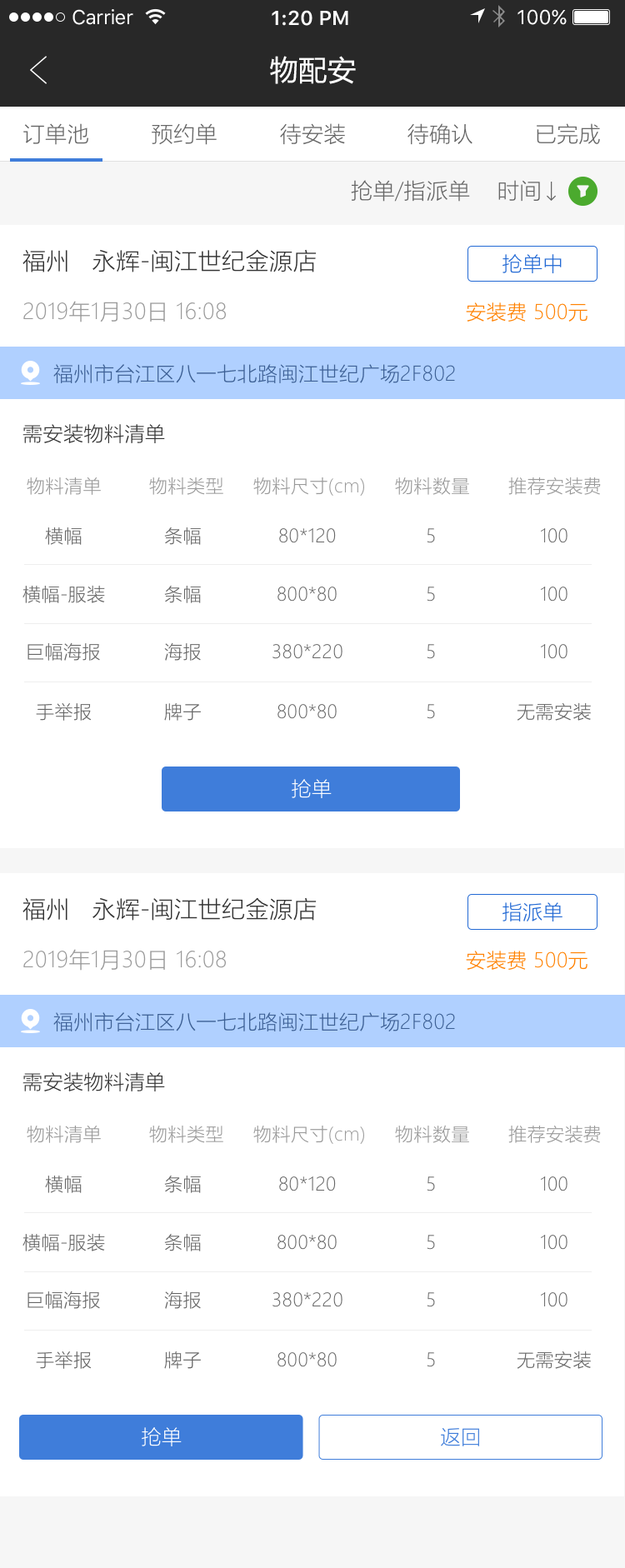
<style>
.page{position:relative;width:625px;height:1568px;background:#ffffff}
.page>*{position:absolute;margin:0}
.t1{font:20px "SFUIText-Regular";letter-spacing:-0.025em;color:#ffffff}
.t2{font:20px "SFUIText-Semibold";color:#ffffff}
.t3{font:20px "SFUIText-Regular";color:#ffffff}
.t4{font:28.3px "MicrosoftYaHei";letter-spacing:0.02em;color:#ffffff}
.t5{font:21.7px "MicrosoftYaHeiLight";letter-spacing:0.02em;color:#666666}
.t6{font:23.3px "MicrosoftYaHeiLight";letter-spacing:0.02em;color:#333333}
.t7{font:20px "MicrosoftYaHeiLight";letter-spacing:0.02em;color:#2269d4}
.t8{font:21.7px "MicrosoftYaHeiLight";letter-spacing:0.02em;color:#999999}
.t9{font:20px "MicrosoftYaHeiLight";letter-spacing:0.02em;color:#ff8100}
.t10{font:20px "MicrosoftYaHeiLight";letter-spacing:0.02em;color:#3d6094}
.t11{font:20px "MicrosoftYaHeiLight";letter-spacing:0.02em;color:#333333}
.t12{font:18.3px "MicrosoftYaHeiLight";letter-spacing:0.02em;color:#999999}
.t13{font:18.3px "MicrosoftYaHeiLight";letter-spacing:0.02em;color:#666666}
.t14{font:20px "MicrosoftYaHeiLight";letter-spacing:0.02em;color:#ffffff}
.t15{font:20px "MicrosoftYaHeiLight";letter-spacing:0.02em;color:#3f7dda}
</style>
<div class="page">
<p class="t1" style="left:72px;top:9px;width:61px;height:16px">Carrier</p>
<p class="t2" style="left:272px;top:10px;width:76px;height:16px">1:20 PM</p>
<p class="t3" style="left:517px;top:9px;width:50px;height:16px">100%</p>
<p class="t4" style="left:270px;top:56px;width:86px;height:28px">物配安</p>
<p class="t5" style="left:23px;top:123px;width:65px;height:22px">订单池</p>
<p class="t5" style="left:152px;top:123px;width:65px;height:22px">预约单</p>
<p class="t5" style="left:280px;top:123px;width:65px;height:22px">待安装</p>
<p class="t5" style="left:407px;top:123px;width:65px;height:22px">待确认</p>
<p class="t5" style="left:537px;top:123px;width:63px;height:21px">已完成</p>
<p class="t5" style="left:351px;top:180px;width:119px;height:22px">抢单/指派单</p>
<p class="t5" style="left:498px;top:180px;width:42px;height:22px">时间</p>
<p class="t6" style="left:22px;top:249px;width:295px;height:23px">福州   永辉-闽江世纪金源店</p>
<p class="t7" style="left:502px;top:254px;width:60px;height:20px">抢单中</p>
<p class="t8" style="left:23px;top:301px;width:203px;height:21px">2019年1月30日 16:08</p>
<p class="t9" style="left:466px;top:302px;width:121px;height:20px">安装费 500元</p>
<p class="t10" style="left:53px;top:364px;width:402px;height:19px">福州市台江区八一七北路闽江世纪广场2F802</p>
<p class="t11" style="left:22px;top:424px;width:143px;height:19px">需安装物料清单</p>
<p class="t12" style="left:27px;top:477px;width:74px;height:18px">物料清单</p>
<p class="t12" style="left:149px;top:477px;width:74px;height:18px">物料类型</p>
<p class="t12" style="left:253px;top:477px;width:111px;height:19px">物料尺寸(cm)</p>
<p class="t12" style="left:395px;top:477px;width:74px;height:18px">物料数量</p>
<p class="t12" style="left:508px;top:477px;width:93px;height:18px">推荐安装费</p>
<p class="t13" style="left:45px;top:527px;width:37px;height:18px">横幅</p>
<p class="t13" style="left:164px;top:527px;width:37px;height:18px">条幅</p>
<p class="t13" style="left:279px;top:528px;width:57px;height:15px">80*120</p>
<p class="t13" style="left:427px;top:528px;width:8px;height:15px">5</p>
<p class="t13" style="left:541px;top:528px;width:26px;height:15px">100</p>
<p class="t13" style="left:22px;top:585px;width:83px;height:18px">横幅-服装</p>
<p class="t13" style="left:164px;top:586px;width:37px;height:17px">条幅</p>
<p class="t13" style="left:277px;top:587px;width:60px;height:15px">800*80</p>
<p class="t13" style="left:427px;top:587px;width:8px;height:15px">5</p>
<p class="t13" style="left:541px;top:587px;width:26px;height:15px">100</p>
<p class="t13" style="left:27px;top:642px;width:73px;height:19px">巨幅海报</p>
<p class="t13" style="left:164px;top:642px;width:37px;height:19px">海报</p>
<p class="t13" style="left:272px;top:644px;width:70px;height:15px">380*220</p>
<p class="t13" style="left:427px;top:644px;width:8px;height:15px">5</p>
<p class="t13" style="left:541px;top:644px;width:26px;height:15px">100</p>
<p class="t13" style="left:36px;top:703px;width:56px;height:18px">手举报</p>
<p class="t13" style="left:164px;top:703px;width:37px;height:18px">牌子</p>
<p class="t13" style="left:277px;top:704px;width:60px;height:15px">800*80</p>
<p class="t13" style="left:427px;top:704px;width:8px;height:15px">5</p>
<p class="t13" style="left:517px;top:702px;width:74px;height:19px">无需安装</p>
<p class="t14" style="left:292px;top:779px;width:40px;height:19px">抢单</p>
<p class="t6" style="left:22px;top:897px;width:295px;height:24px">福州   永辉-闽江世纪金源店</p>
<p class="t7" style="left:502px;top:902px;width:60px;height:19px">指派单</p>
<p class="t8" style="left:23px;top:949px;width:203px;height:22px">2019年1月30日 16:08</p>
<p class="t9" style="left:466px;top:951px;width:121px;height:19px">安装费 500元</p>
<p class="t10" style="left:53px;top:1012px;width:402px;height:19px">福州市台江区八一七北路闽江世纪广场2F802</p>
<p class="t11" style="left:22px;top:1072px;width:143px;height:19px">需安装物料清单</p>
<p class="t12" style="left:27px;top:1125px;width:74px;height:18px">物料清单</p>
<p class="t12" style="left:149px;top:1125px;width:74px;height:18px">物料类型</p>
<p class="t12" style="left:253px;top:1125px;width:111px;height:19px">物料尺寸(cm)</p>
<p class="t12" style="left:395px;top:1125px;width:74px;height:18px">物料数量</p>
<p class="t12" style="left:508px;top:1125px;width:93px;height:18px">推荐安装费</p>
<p class="t13" style="left:45px;top:1176px;width:37px;height:17px">横幅</p>
<p class="t13" style="left:164px;top:1176px;width:37px;height:17px">条幅</p>
<p class="t13" style="left:279px;top:1176px;width:57px;height:15px">80*120</p>
<p class="t13" style="left:427px;top:1176px;width:8px;height:15px">5</p>
<p class="t13" style="left:541px;top:1176px;width:26px;height:15px">100</p>
<p class="t13" style="left:22px;top:1233px;width:83px;height:18px">横幅-服装</p>
<p class="t13" style="left:164px;top:1234px;width:37px;height:17px">条幅</p>
<p class="t13" style="left:277px;top:1235px;width:60px;height:15px">800*80</p>
<p class="t13" style="left:427px;top:1235px;width:8px;height:15px">5</p>
<p class="t13" style="left:541px;top:1235px;width:26px;height:15px">100</p>
<p class="t13" style="left:27px;top:1291px;width:73px;height:18px">巨幅海报</p>
<p class="t13" style="left:164px;top:1291px;width:37px;height:18px">海报</p>
<p class="t13" style="left:272px;top:1292px;width:70px;height:15px">380*220</p>
<p class="t13" style="left:427px;top:1292px;width:8px;height:15px">5</p>
<p class="t13" style="left:541px;top:1292px;width:26px;height:15px">100</p>
<p class="t13" style="left:36px;top:1351px;width:56px;height:18px">手举报</p>
<p class="t13" style="left:164px;top:1351px;width:37px;height:18px">牌子</p>
<p class="t13" style="left:277px;top:1352px;width:60px;height:15px">800*80</p>
<p class="t13" style="left:427px;top:1352px;width:8px;height:15px">5</p>
<p class="t13" style="left:517px;top:1351px;width:74px;height:18px">无需安装</p>
<p class="t14" style="left:142px;top:1427px;width:40px;height:19px">抢单</p>
<p class="t15" style="left:441px;top:1428px;width:38px;height:18px">返回</p>
</div>
